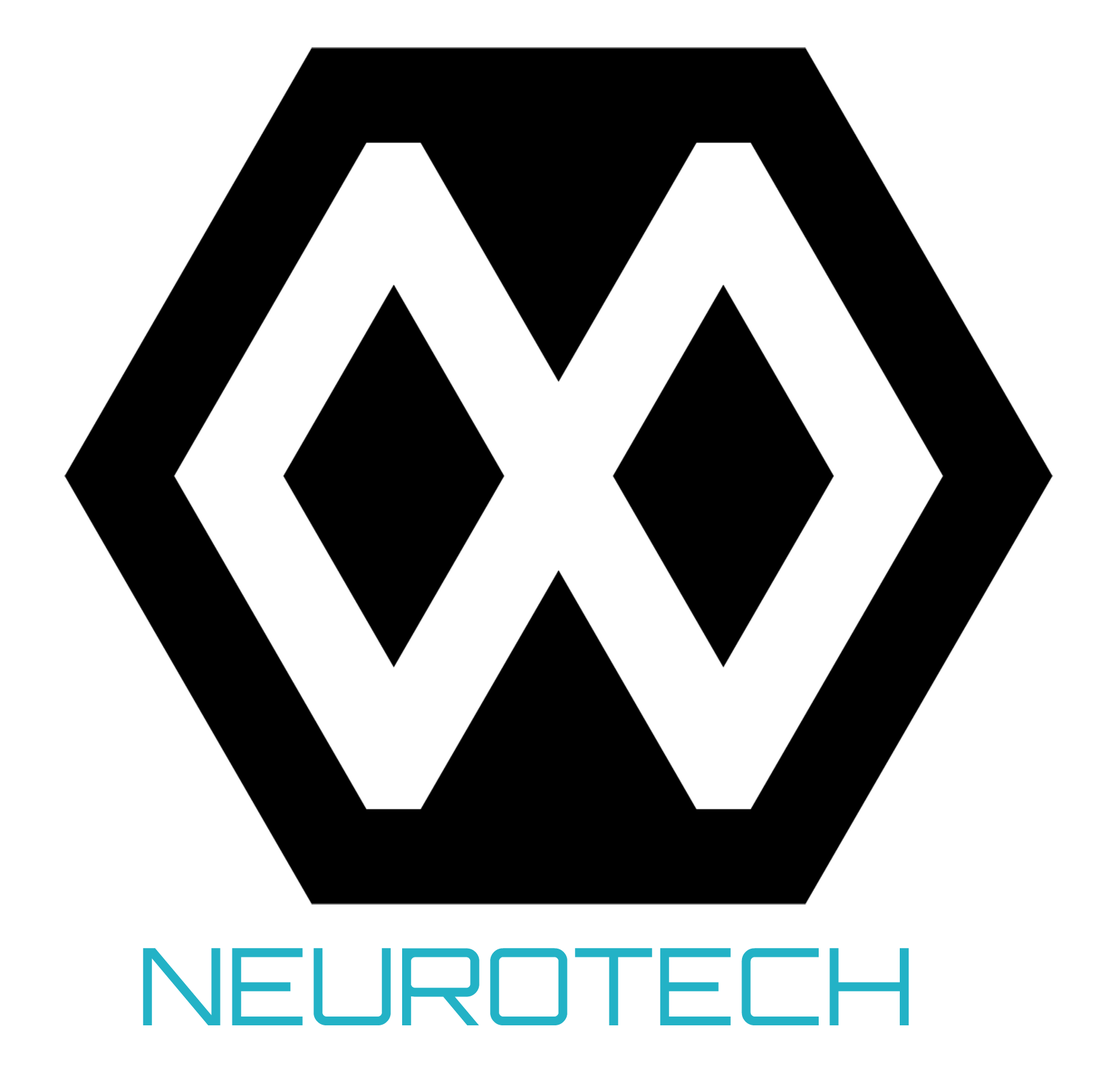
<style>
.page{position:relative;width:1109px;height:1075px;background:#ffffff}
.page>*{position:absolute;margin:0}
.t1{font:106.9px "Orbitron-Regular";color:#23b2c6}
.t2{font:106.9px "Orbitron-Regular";color:#ffffff}
</style>
<div class="page">
<p class="t1" style="left:143px;top:948px;width:853px;height:77px">NEUROTECH<span class="t2">X</span></p>
</div>
